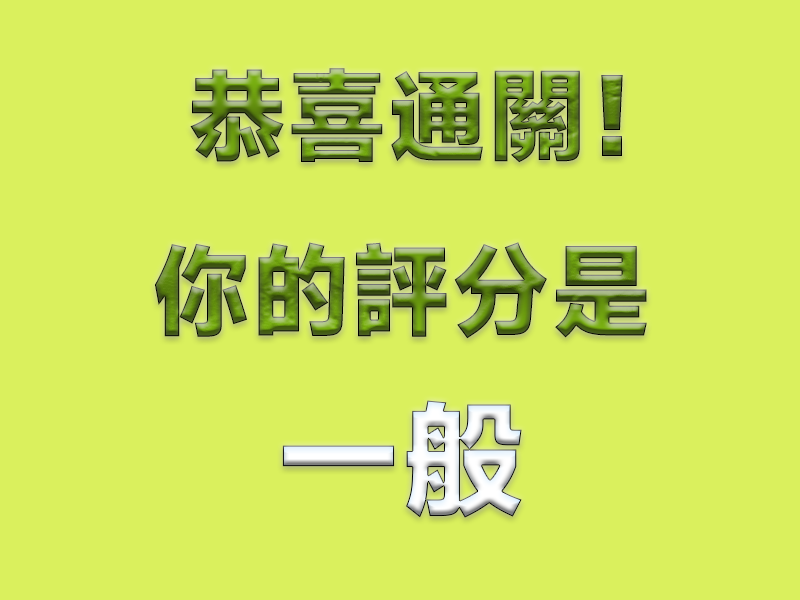
<style>
.page{position:relative;width:800px;height:600px;background:#daf05d}
.page>*{position:absolute;margin:0}
.t1{font:100px "MiSans-Heavy"}
.t2{font:125px "MiSans-Heavy"}
</style>
<div class="page">
<p class="t1" style="left:155px;top:68px;width:492px;height:271px">恭喜通關！<br>你的評分是</p>
<p class="t2" style="left:282px;top:400px;width:240px;height:118px">一般</p>
</div>
